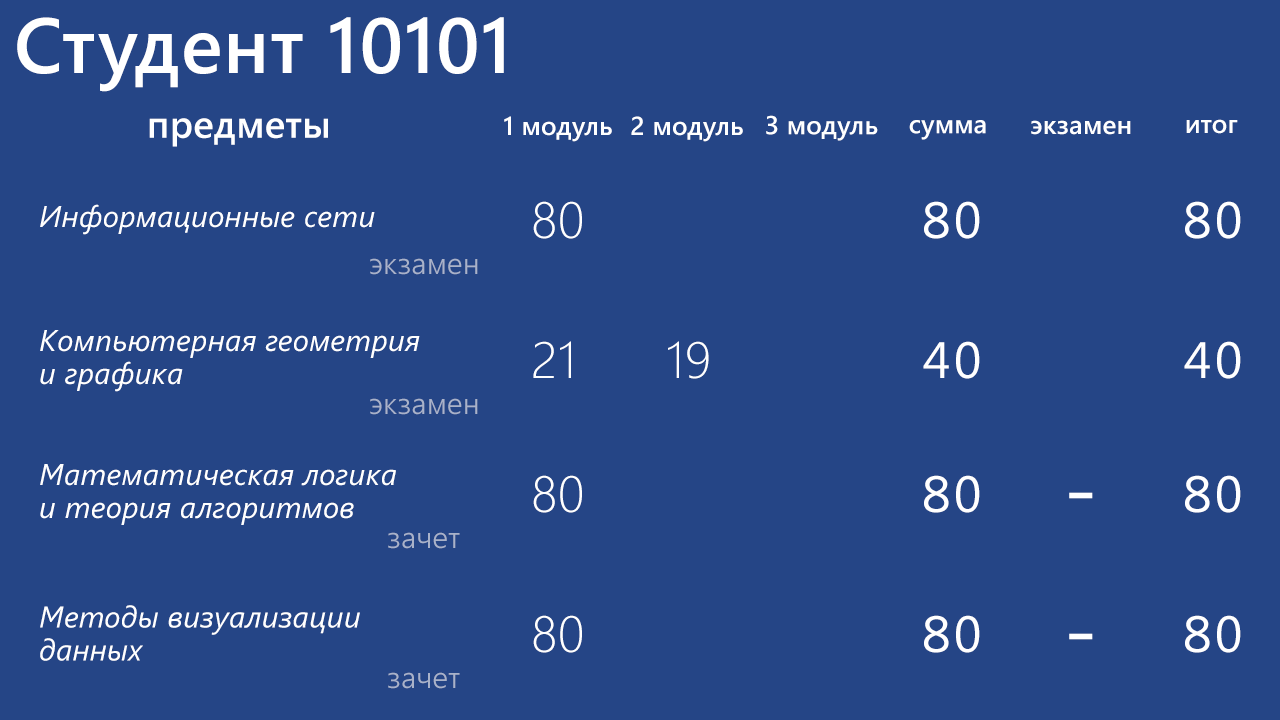
<style>
.page{position:relative;width:1280px;height:720px;background:#254586}
.page>*{position:absolute;margin:0}
.t1{font:78px "SegoeUI-Semibold";letter-spacing:0.012em;color:#ffffff}
.t2{font:38px "SegoeUI-Semibold";letter-spacing:0.012em;color:#ffffff}
.t3{font:26px "SegoeUI-Semibold";letter-spacing:0.012em;color:#ffffff}
.t4{font:30px "SegoeUI-Italic";letter-spacing:0.012em;color:#ffffff}
.t5{font:51px "SegoeUI-Light";letter-spacing:0.012em;color:#ffffff}
.t6{font:51px "SegoeUIMono";letter-spacing:0.012em;color:#ffffff}
.t7{font:30px "SegoeUI-Semilight";letter-spacing:0.012em;color:#a9b2c9}
.t8{font:30px/33px "SegoeUI-Italic";letter-spacing:0.012em;color:#ffffff}
.t9{font:86px "SegoeUIMono";letter-spacing:0.012em;color:#ffffff}
</style>
<div class="page">
<p class="t1" style="left:17px;top:17px;width:487px;height:75px">Студент 10101</p>
<p class="t2" style="left:149px;top:118px;width:179px;height:29px">предметы</p>
<p class="t3" style="left:504px;top:116px;width:108px;height:26px">1 модуль</p>
<p class="t3" style="left:631px;top:116px;width:112px;height:26px">2 модуль</p>
<p class="t3" style="left:766px;top:115px;width:112px;height:26px">3 модуль</p>
<p class="t3" style="left:909px;top:120px;width:77px;height:20px">сумма</p>
<p class="t3" style="left:1031px;top:120px;width:100px;height:15px">экзамен</p>
<p class="t3" style="left:1186px;top:119px;width:52px;height:15px">итог</p>
<p class="t4" style="left:40px;top:204px;width:335px;height:31px">Информационные сети</p>
<p class="t5" style="left:533px;top:201px;width:49px;height:38px">80</p>
<p class="t6" style="left:924px;top:201px;width:56px;height:38px">80</p>
<p class="t6" style="left:1185px;top:201px;width:56px;height:38px">80</p>
<p class="t7" style="left:370px;top:258px;width:108px;height:17px">экзамен</p>
<p class="t8" style="left:40px;top:330px;width:380px;height:62px">Компьютерная геометрия <br>и графика</p>
<p class="t5" style="left:533px;top:341px;width:38px;height:37px">21</p>
<p class="t5" style="left:668px;top:341px;width:41px;height:38px">19</p>
<p class="t6" style="left:923px;top:341px;width:57px;height:38px">40</p>
<p class="t6" style="left:1184px;top:341px;width:57px;height:38px">40</p>
<p class="t7" style="left:370px;top:398px;width:108px;height:17px">экзамен</p>
<p class="t8" style="left:40px;top:464px;width:356px;height:61px">Математическая логика <br>и теория алгоритмов</p>
<p class="t5" style="left:533px;top:475px;width:49px;height:38px">80</p>
<p class="t6" style="left:924px;top:475px;width:56px;height:38px">80</p>
<p class="t6" style="left:1185px;top:475px;width:56px;height:38px">80</p>
<p class="t9" style="left:1069px;top:492px;width:24px;height:7px">-</p>
<p class="t7" style="left:388px;top:532px;width:72px;height:17px">зачет</p>
<p class="t8" style="left:40px;top:605px;width:320px;height:56px">Методы визуализации <br>данных</p>
<p class="t5" style="left:533px;top:615px;width:49px;height:38px">80</p>
<p class="t6" style="left:924px;top:615px;width:56px;height:38px">80</p>
<p class="t6" style="left:1185px;top:615px;width:56px;height:38px">80</p>
<p class="t9" style="left:1069px;top:633px;width:24px;height:7px">-</p>
<p class="t7" style="left:388px;top:672px;width:72px;height:17px">зачет</p>
</div>
